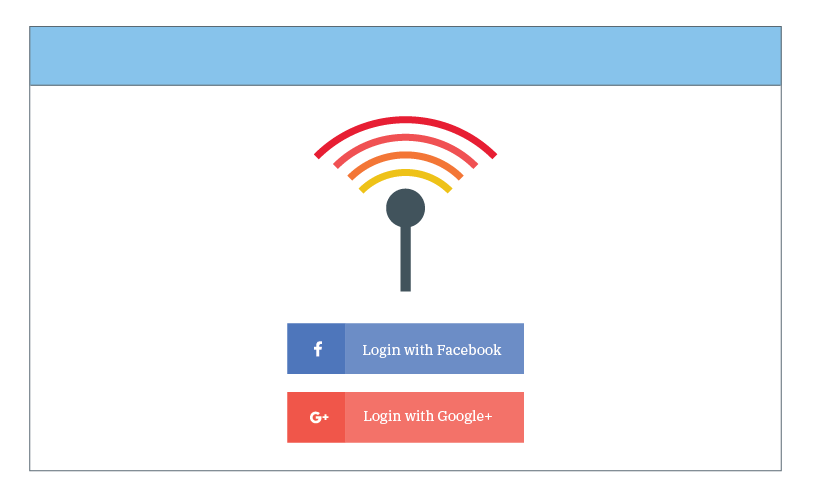
<style>
.page{position:relative;width:819px;height:498px;background:#ffffff}
.page>*{position:absolute;margin:0}
.t1{font:14px "IBMPlexSerif";color:#ffffff}
</style>
<div class="page">
<p class="t1" style="left:363px;top:344px;width:139px;height:14px">Login with Facebook</p>
<p class="t1" style="left:364px;top:410px;width:128px;height:14px">Login with Google+</p>
</div>
